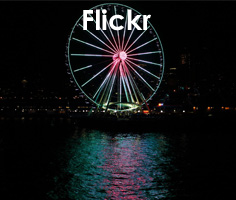
<style>
.page{position:relative;width:236px;height:200px;background:#010101}
.page>*{position:absolute;margin:0}
.t1{font:28px "CenturyGothic-Bold";color:#ffffff}
</style>
<div class="page">
<p class="t1" style="left:83px;top:9px;width:68px;height:22px">Flickr</p>
</div>
